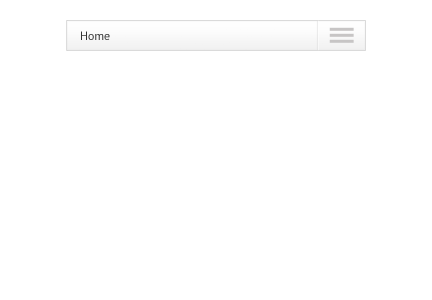
<style>
.page{position:relative;width:432px;height:300px;background:#ffffff}
.page>*{position:absolute;margin:0}
.t1{font:12px "PTSans-Regular";letter-spacing:-0.01em;color:#333333}
</style>
<div class="page">
<p class="t1" style="left:81px;top:31px;width:29px;height:9px">Home</p>
</div>
